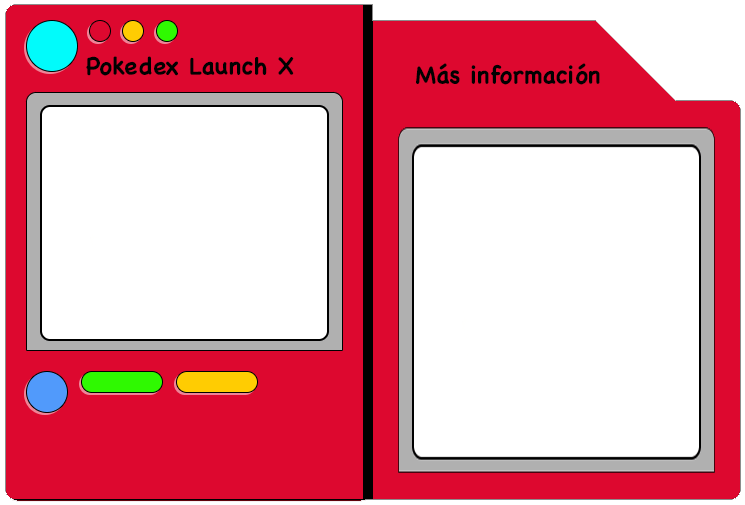
<style>
.page{position:relative;width:745px;height:505px;background:#ffffff}
.page>*{position:absolute;margin:0}
.t1{font:24px "ChalkboardSE-Bold";color:#010101}
</style>
<div class="page">
<p class="t1" style="left:86px;top:56px;width:208px;height:20px">Pokedex Launch X</p>
<p class="t1" style="left:416px;top:63px;width:184px;height:22px">Más información</p>
</div>
